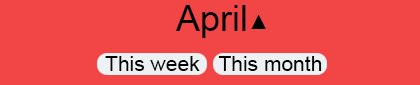
<style>
.page{position:relative;width:420px;height:85px;background:#f24646}
.page>*{position:absolute;margin:0}
.t1{font:36px "ArialMT";color:#000000}
.t2{font:21px "ArialMT";color:#000000}
</style>
<div class="page">
<p class="t1" style="left:176px;top:5px;width:70px;height:33px">April</p>
<p class="t2" style="left:251px;top:14px;width:15px;height:15px">▲</p>
<p class="t2" style="left:105px;top:56px;width:95px;height:15px">This week</p>
<p class="t2" style="left:218px;top:56px;width:104px;height:15px">This month</p>
</div>
